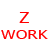
<style>
.page{position:relative;width:48px;height:48px;background:#ffffff}
.page>*{position:absolute;margin:0}
.t1{font:13.3px "Tahoma";letter-spacing:0.025em;color:#ff0000;scale:1.2 1}
.t2{font:14.7px "Tahoma";letter-spacing:0.025em;color:#ff0000;scale:1.2 1}
</style>
<div class="page">
<p class="t1" style="left:1px;top:12px;width:47px;height:27px;text-align:center"><span class="t2">Z<br></span>WORK</p>
</div>
